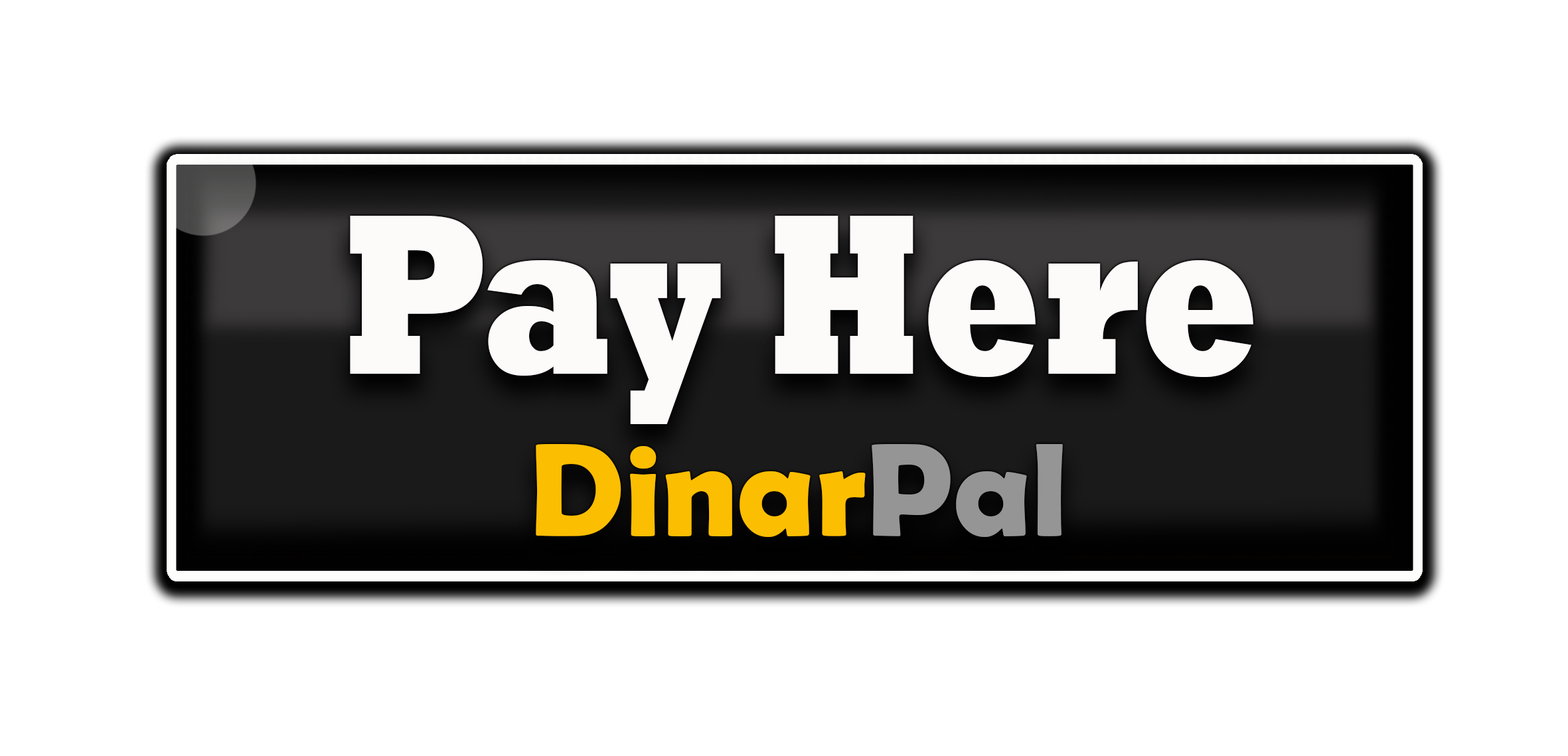
<style>
.page{position:relative;width:1568px;height:756px;background:#ffffff}
.page>*{position:absolute;margin:0}
.t1{font:232.1px "Rockwell-ExtraBold";color:#fdfafa;scale:0.76 1}
.t2{font:133.1px "BerlinSansFBDemi-Bold";color:#fcbe01}
.t3{font:133.1px "BerlinSansFBDemi-Bold";color:#959595}
</style>
<div class="page">
<p class="t1" style="left:350px;top:216px;width:903px;height:208px">Pay Here</p>
<p class="t2" style="left:536px;top:444px;width:527px;height:93px">Dinar<span class="t3">Pal</span></p>
</div>
